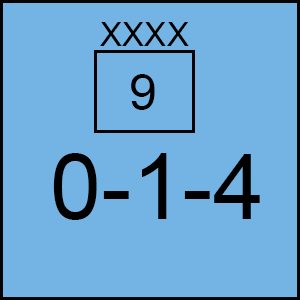
<style>
.page{position:relative;width:300px;height:300px;background:#74b4e4}
.page>*{position:absolute;margin:0}
.t1{font:33.3px "ArialMT";color:#000000}
.t2{font:50px "ArialMT";color:#000000}
.t3{font:91.7px "ArialMT";color:#000000}
</style>
<div class="page">
<p class="t1" style="left:100px;top:22px;width:89px;height:24px">XXXX</p>
<p class="t2" style="left:131px;top:74px;width:24px;height:36px">9</p>
<p class="t3" style="left:53px;top:153px;width:207px;height:67px">0-1-4</p>
</div>
